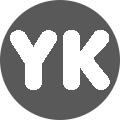
<style>
.page{position:relative;width:120px;height:120px;background:#595959}
.page>*{position:absolute;margin:0}
.t1{font:84.8px "Junegull-Regular";color:#ffffff;scale:1.04 1}
</style>
<div class="page">
<p class="t1" style="left:10px;top:30px;width:100px;height:60px">YK</p>
</div>
